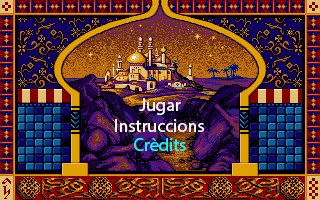
<style>
.page{position:relative;width:320px;height:200px}
.page>*{position:absolute;margin:0}
.t1{font:18px "MyriadPro-Regular";color:#fefefe}
.t2{font:18px "MyriadPro-Regular";color:#00ffff}
</style>
<div class="page">
<p class="t1" style="left:139px;top:98px;width:42px;height:17px">Jugar</p>
<p class="t1" style="left:115px;top:119px;width:89px;height:13px">Instruccions</p>
<p class="t2" style="left:134px;top:138px;width:52px;height:13px">Crèdits</p>
</div>
